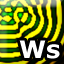
<style>
.page{position:relative;width:64px;height:64px}
.page>*{position:absolute;margin:0}
.t1{font:24px "Verdana-Bold";color:#ffffff}
</style>
<div class="page">
<p class="t1" style="left:19px;top:40px;width:41px;height:19px">Ws</p>
</div>
